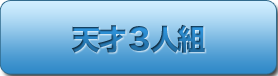
<style>
.page{position:relative;width:278px;height:76px}
.page>*{position:absolute;margin:0}
.t1{font:29.2px "HiraKakuStdN-W8";letter-spacing:-0.1em}
</style>
<div class="page">
<p class="t1" style="left:71px;top:24px;width:134px;height:29px">天才３人組</p>
</div>
